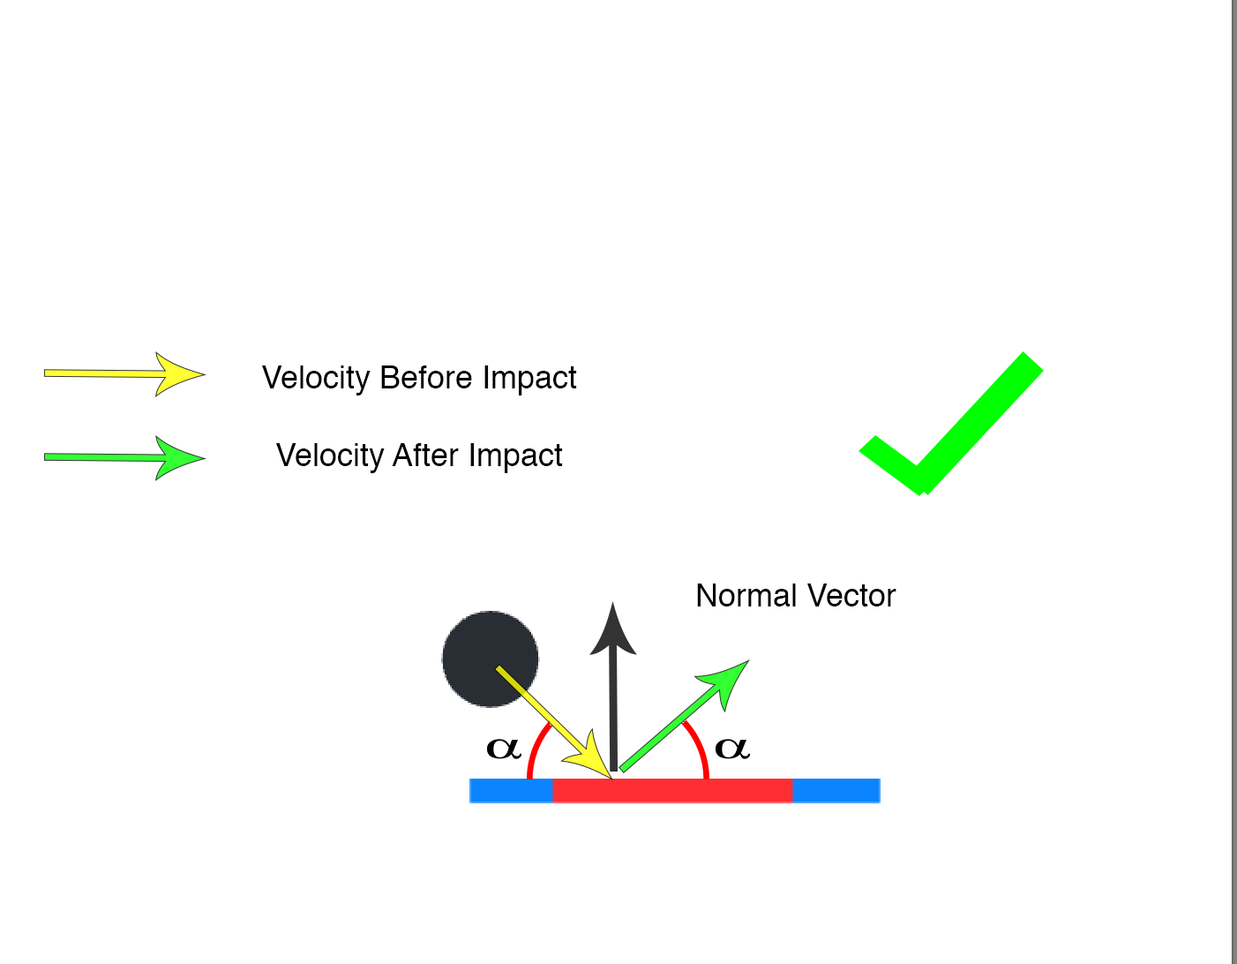
<style>
.page{position:relative;width:1237px;height:964px;background:#ffffff}
.page>*{position:absolute;margin:0}
.t1{font:31.8px "Helvetica";color:#000000}
</style>
<div class="page">
<p class="t1" style="left:262px;top:365px;width:315px;height:30px">Velocity Before Impact</p>
<p class="t1" style="left:276px;top:443px;width:287px;height:30px">Velocity After Impact</p>
<p class="t1" style="left:697px;top:583px;width:200px;height:23px">Normal Vector</p>
</div>
